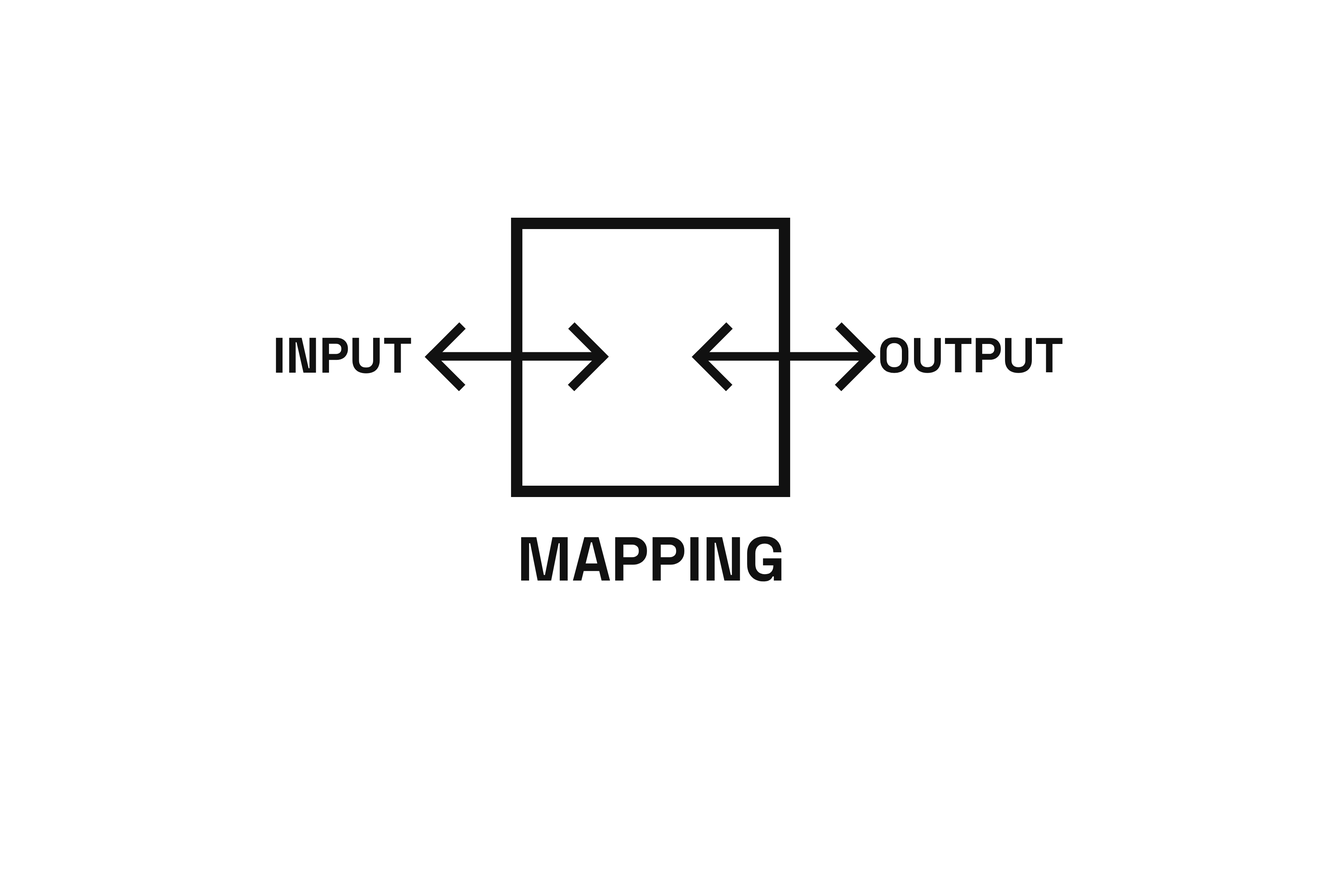
<style>
.page{position:relative;width:1337px;height:892px;background:#ffffff}
.page>*{position:absolute;margin:0}
.t1{font:49.8px "SpaceGroteskLight-Bold";color:#111111}
.t2{font:48.9px "SpaceGroteskLight-Bold";color:#111111}
.t3{font:61.9px "SpaceGroteskLight-Bold";color:#111111}
</style>
<div class="page">
<p class="t1" style="left:276px;top:337px;width:135px;height:36px">INPUT</p>
<p class="t2" style="left:880px;top:337px;width:183px;height:36px">OUTPUT</p>
<p class="t3" style="left:521px;top:536px;width:261px;height:45px">MAPPING</p>
</div>
